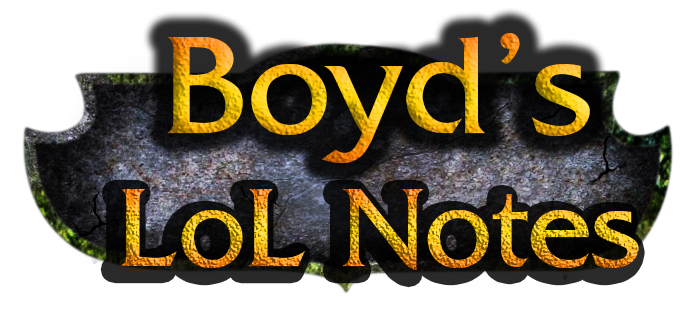
<style>
.page{position:relative;width:692px;height:334px;background:#ffffff}
.page>*{position:absolute;margin:0}
.t1{font:147.8px "FrizQuadrata"}
.t2{font:119.3px "FrizQuadrata"}
</style>
<div class="page">
<p class="t1" style="left:167px;top:33px;width:423px;height:130px">Boyd's</p>
<p class="t2" style="left:120px;top:189px;width:519px;height:81px">LoL Notes</p>
</div>
